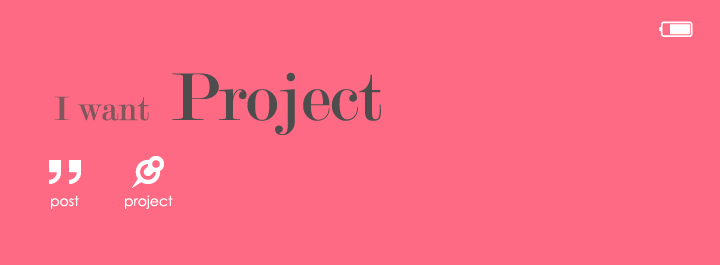
<style>
.page{position:relative;width:720px;height:265px;background:#fe6a84}
.page>*{position:absolute;margin:0}
.t1{font:72px "Modern-Regular";color:#4c4c4c}
.t2{font:36px "Modern-Regular";color:#82565d}
.t3{font:14px "CenturyGothic";color:#fbfbfb}
.t4{font:14px "CenturyGothic";color:#ffffff}
</style>
<div class="page">
<p class="t1" style="left:172px;top:72px;width:209px;height:63px">Project</p>
<p class="t2" style="left:54px;top:96px;width:95px;height:25px">I want</p>
<p class="t3" style="left:51px;top:195px;width:28px;height:14px">post</p>
<p class="t4" style="left:125px;top:195px;width:48px;height:14px">project</p>
</div>
